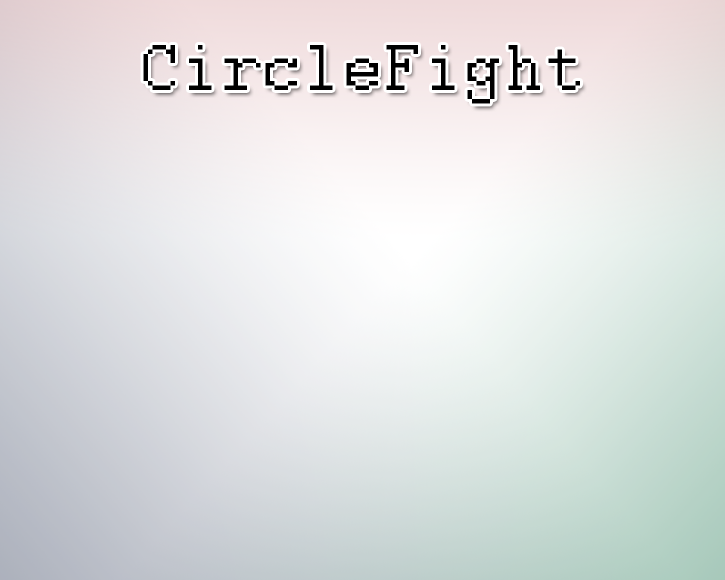
<style>
.page{position:relative;width:725px;height:580px}
.page>*{position:absolute;margin:0}
.t1{font:72px "Courier";color:#000000}
</style>
<div class="page">
<p class="t1" style="left:143px;top:45px;width:437px;height:59px">CircleFight</p>
</div>
